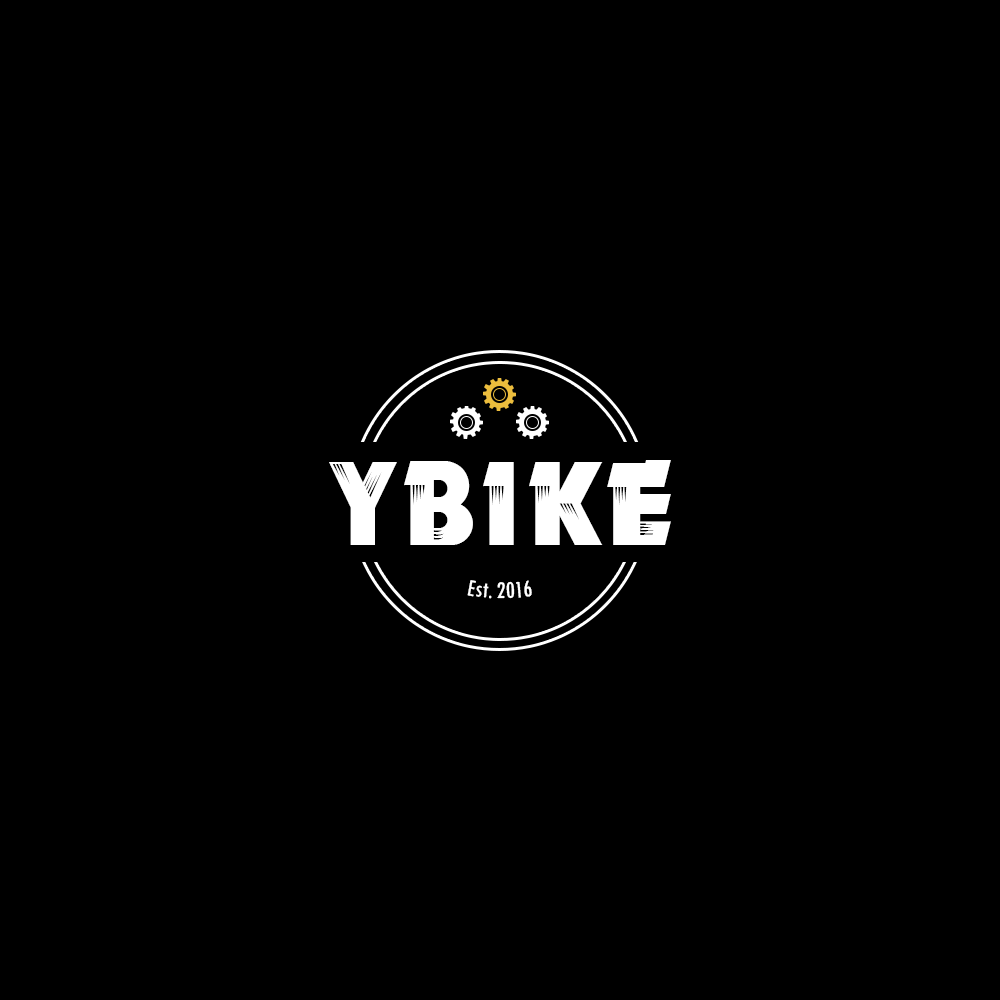
<style>
.page{position:relative;width:1000px;height:1000px;background:#000000}
.page>*{position:absolute;margin:0}
.t1{font:100px "New-MOTOR";letter-spacing:0.05em;color:#ffffff}
.t2{font:25px "TwCenMT-Condensed";color:#ffffff}
</style>
<div class="page">
<p class="t1" style="left:329px;top:460px;width:342px;height:85px">YBike</p>
<p class="t2" style="left:467px;top:580px;width:65px;height:19px">Est. 2016</p>
</div>
